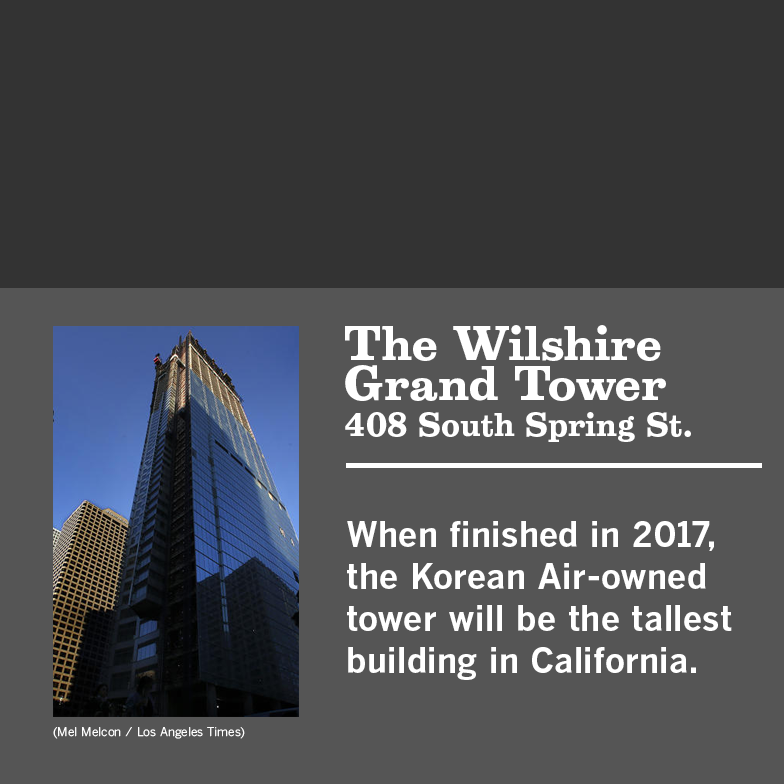
<style>
.page{position:relative;width:784px;height:784px;background:#555555}
.page>*{position:absolute;margin:0}
.t1{font:44px/40px "Belizio-Bold";color:#ffffff}
.t2{font:30px "Belizio-Bold";color:#ffffff}
.t3{font:35px "BentonGothic-Bold";color:#ffffff}
.t4{font:12px "BentonGothicTab-Regular";color:#ffffff}
</style>
<div class="page">
<p class="t1" style="left:345px;top:325px;width:346px;height:117px">The Wilshire<br>Grand Tower<br><span class="t2">408 South Spring St.</span></p>
<p class="t3" style="left:347px;top:521px;width:385px;height:159px"><span class="t2"><br></span>When finished in 2017, the Korean Air-owned tower will be the tallest building in California.</p>
<p class="t4" style="left:53px;top:727px;width:192px;height:12px">(Mel Melcon / Los Angeles Times)</p>
</div>
